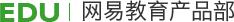
<style>
.page{position:relative;width:234px;height:22px;background:#ffffff}
.page>*{position:absolute;margin:0}
.t1{font:28px "GillSansMT-Bold";color:#39a030}
.t2{font:22px "HiraginoSansGB-W3";color:#333333}
</style>
<div class="page">
<p class="t1" style="left:0px;top:3px;width:59px;height:19px">EDU</p>
<p class="t2" style="left:82px;top:0px;width:152px;height:22px">网易教育产品部</p>
</div>
